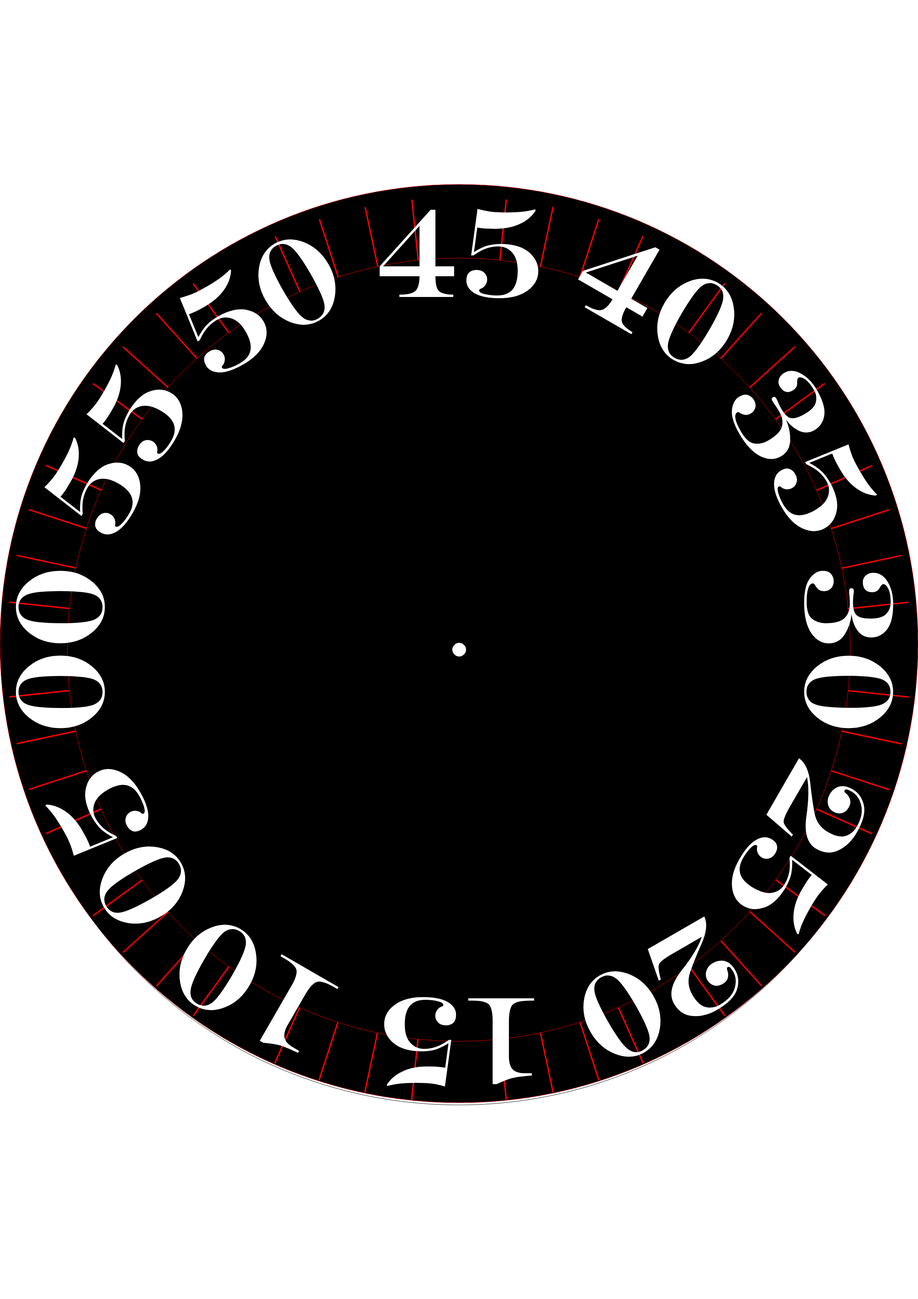
<style>
.page{position:relative;width:918px;height:1299px;background:#000000}
.page>*{position:absolute;margin:0}
.t1{font:125.9px "Engry";color:#ffffff}
</style>
<div class="page">
<p class="t1" style="left:379px;top:209px;width:160px;height:89px">45</p>
<p class="t1" style="left:180px;top:236px;width:158px;height:136px;rotate:-30deg">50</p>
<p class="t1" style="left:578px;top:247px;width:159px;height:121px;rotate:30deg">40</p>
<p class="t1" style="left:44px;top:364px;width:140px;height:173px;rotate:-60deg">55</p>
<p class="t1" style="left:731px;top:368px;width:146px;height:166px;rotate:60deg">35</p>
<p class="t1" style="left:16px;top:571px;width:89px;height:157px;rotate:-90deg">00</p>
<p class="t1" style="left:804px;top:571px;width:89px;height:157px;rotate:90deg">30</p>
<p class="t1" style="left:730px;top:758px;width:137px;height:176px;rotate:120deg">25</p>
<p class="t1" style="left:45px;top:766px;width:144px;height:160px;rotate:-120deg">05</p>
<p class="t1" style="left:581px;top:916px;width:159px;height:144px;rotate:150deg">20</p>
<p class="t1" style="left:177px;top:921px;width:162px;height:132px;rotate:-150deg">10</p>
<p class="t1" style="left:384px;top:997px;width:150px;height:89px;rotate:-180deg">15</p>
</div>
